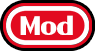
<style>
.page{position:relative;width:95px;height:51px;background:#e20a1f}
.page>*{position:absolute;margin:0}
.t1{font:24px "Pretendo";color:#ffffff}
</style>
<div class="page">
<p class="t1" style="left:20px;top:15px;width:53px;height:20px">Mod</p>
</div>
